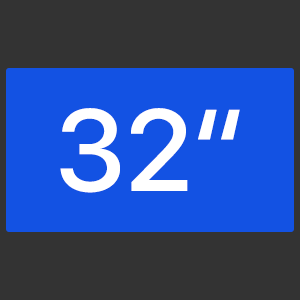
<style>
.page{position:relative;width:300px;height:300px;background:#333333}
.page>*{position:absolute;margin:0}
.t1{font:115px "SFUIDisplay-Medium";color:#ffffff}
</style>
<div class="page">
<p class="t1" style="left:60px;top:108px;width:180px;height:85px">32“</p>
</div>
